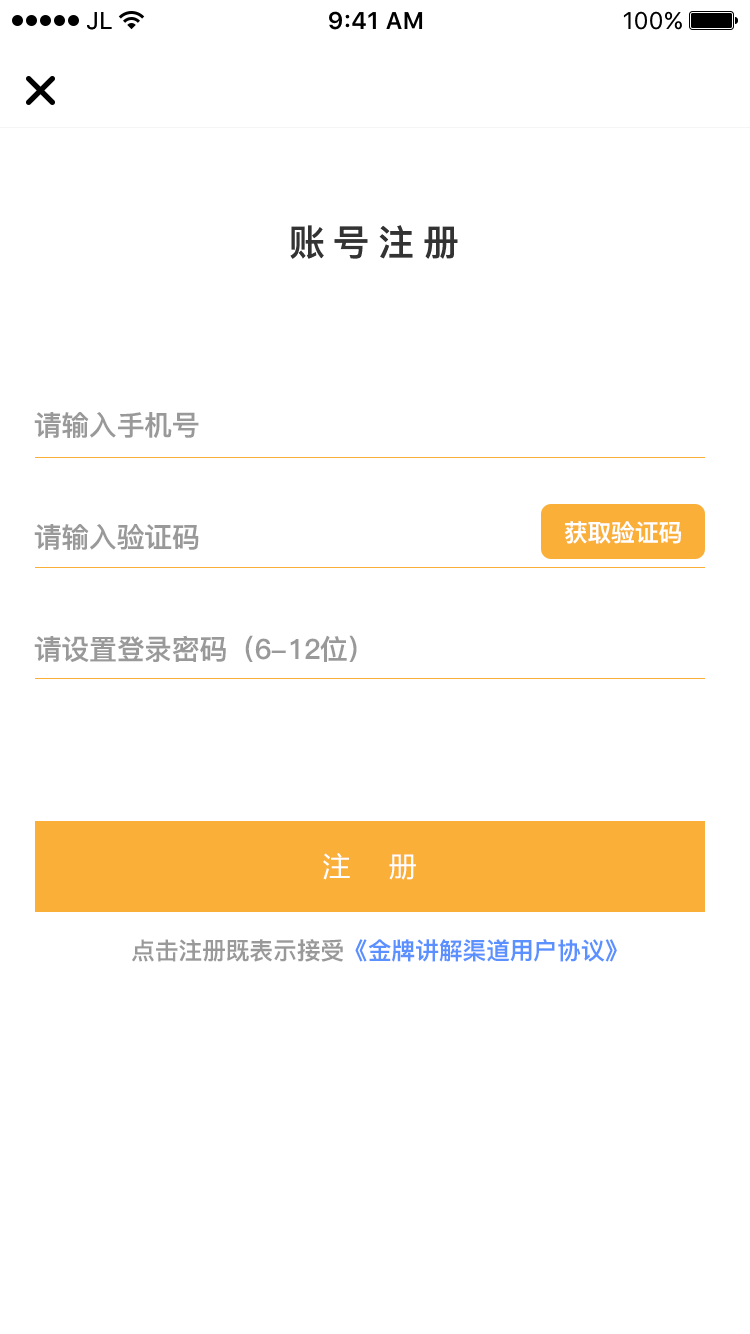
<style>
.page{position:relative;width:750px;height:1334px;background:#ffffff}
.page>*{position:absolute;margin:0}
.t1{font:36px "PingFang-SC-Heavy";letter-spacing:0.24em;color:#333333}
.t2{font:28px "PingFang-SC-Heavy";color:#999999}
.t3{font:24px "PingFang-SC-Heavy";color:#ffffff}
.t4{font:27.6px "MicrosoftYaHei";letter-spacing:0.56em;color:#fefefe}
.t5{font:24px "PingFang-SC-Heavy";color:#5a90ff}
.t6{font:24px "PingFang-SC-Heavy";color:#999999}
</style>
<div class="page">
<p class="t1" style="left:290px;top:225px;width:168px;height:34px">账号注册</p>
<p class="t2" style="left:34px;top:412px;width:165px;height:26px">请输入手机号</p>
<p class="t3" style="left:564px;top:521px;width:117px;height:23px">获取验证码</p>
<p class="t2" style="left:34px;top:524px;width:165px;height:26px">请输入验证码</p>
<p class="t2" style="left:34px;top:635px;width:323px;height:27px">请设置登录密码（6-12位）</p>
<p class="t4" style="left:323px;top:853px;width:93px;height:27px">注 册</p>
<p class="t5" style="left:132px;top:939px;width:485px;height:23px"><span class="t6">点击注册既表示接受</span>《金牌讲解渠道用户协议》</p>
</div>
